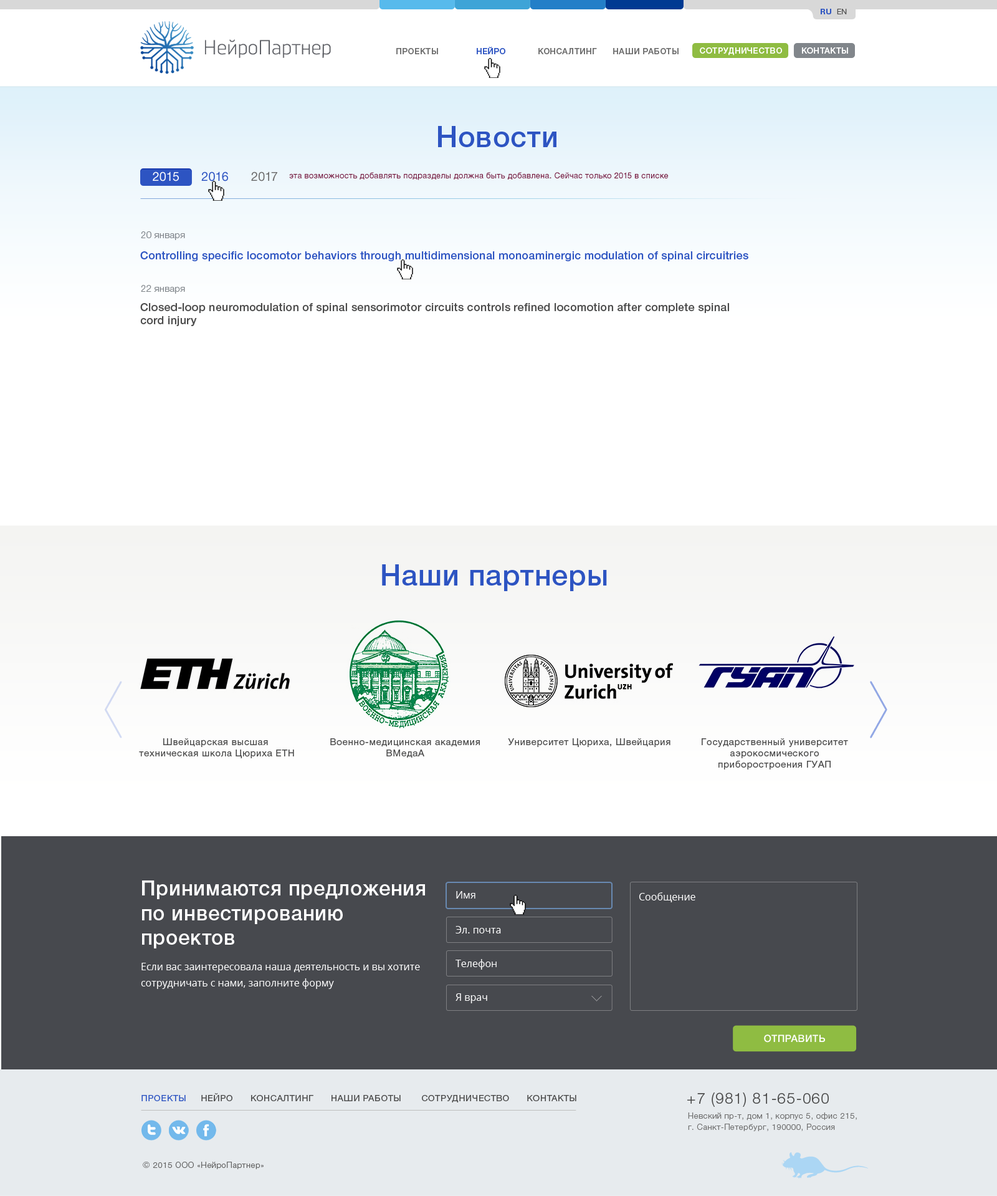
<style>
.page{position:relative;width:997px;height:1196px;background:#ffffff}
.page>*{position:absolute;margin:0}
.t1{font:7.5px "HelveticaNeueCyr-Bold";letter-spacing:0.05em;color:#2d54c2;text-transform:uppercase}
.t2{font:7.5px "HelveticaNeueCyr-Light";letter-spacing:0.05em;color:#4b4b4b;text-transform:uppercase}
.t3{font:8.1px "HelveticaNeueCyr-Medium";letter-spacing:0.05em;color:#6d6d6d;text-transform:uppercase}
.t4{font:8.1px "HelveticaNeueCyr-Medium";letter-spacing:0.05em;color:#2d54c2;text-transform:uppercase}
.t5{font:8.1px "HelveticaNeueCyr-Medium";letter-spacing:0.05em;color:#ffffff;text-transform:uppercase}
.t6{font:29.3px "HelveticaNeueCyr-Medium";letter-spacing:0.02em;color:#2d54c2}
.t7{font:12.5px "HelveticaNeueCyr-Roman";letter-spacing:0.015em;color:#ffffff}
.t8{font:12.5px "HelveticaNeueCyr-Roman";letter-spacing:0.02em;color:#2d54c2}
.t9{font:12.5px "HelveticaNeueCyr-Roman";letter-spacing:0.02em;color:#6d6d6d}
.t10{font:8.1px "HelveticaNeueCyr-Roman";letter-spacing:0.02em;color:#67002a}
.t11{font:9.4px "HelveticaNeueCyr-Light";letter-spacing:0.02em;color:#81868b}
.t12{font:11.2px "HelveticaNeueCyr-Medium";letter-spacing:0.015em;color:#2d54c2}
.t13{font:11.2px/13.1px "HelveticaNeueCyr-Medium";letter-spacing:0.015em;color:#4b4b4b}
.t14{font:29.1px "HelveticaNeueCyr-Medium";letter-spacing:0.02em;color:#2d54c2}
.t15{font:9.4px "HelveticaNeueCyr-Roman";letter-spacing:0.05em;color:#4b4b4b}
.t16{font:20.6px "HelveticaNeueCyr-Medium";letter-spacing:0.02em;color:#ffffff}
.t17{font:10px "OpenSans";color:#ffffff}
.t18{font:10px/16.2px "OpenSans";color:#ffffff}
.t19{font:10px "HelveticaNeueCyr-Medium";letter-spacing:0.02em;color:#ffffff;text-transform:uppercase}
.t20{font:8.7px "HelveticaNeueCyr-Roman";letter-spacing:0.05em;color:#4b4b4b;text-transform:uppercase}
.t21{font:8.7px "HelveticaNeueCyr-Roman";letter-spacing:0.05em;color:#2d54c2;text-transform:uppercase}
.t22{font:15.3px "HelveticaNeueCyr-Light";letter-spacing:0.05em;color:#4b4b4b}
.t23{font:8.1px/11.2px "HelveticaNeueCyr-Light";letter-spacing:0.05em;color:#6f6f6f}
.t24{font:8.1px "HelveticaNeueCyr-Light";letter-spacing:0.05em;color:#636363}
.t25{font:8.7px "HelveticaNeueCyr-Roman";letter-spacing:0.05em;color:#636363}
</style>
<div class="page">
<p class="t1" style="left:821px;top:9px;width:26px;height:5px">Ru  <span class="t2">En</span></p>
<p class="t3" style="left:396px;top:47px;width:283px;height:7px">Проекты              <span class="t4">Нейро</span>            Консалтинг      Наши работы</p>
<p class="t5" style="left:700px;top:47px;width:148px;height:8px">Сотрудничество       Контакты</p>
<p class="t6" style="left:438px;top:126px;width:119px;height:21px">Новости</p>
<p class="t7" style="left:153px;top:171px;width:124px;height:10px">2015      <span class="t8">2016</span><span class="t9">      2017</span></p>
<p class="t10" style="left:289px;top:172px;width:379px;height:8px">эта возможность добавлять подразделы должна быть добавлена. Сейчас только 2015 в списке</p>
<p class="t11" style="left:141px;top:231px;width:44px;height:9px">20 января</p>
<p class="t12" style="left:140px;top:251px;width:609px;height:10px">Controlling specific locomotor behaviors through multidimensional monoaminergic modulation of spinal circuitries</p>
<p class="t11" style="left:141px;top:285px;width:44px;height:9px">22 января</p>
<p class="t13" style="left:140px;top:303px;width:589px;height:23px">Closed-loop neuromodulation of spinal sensorimotor circuits controls refined locomotion after complete spinal <br>cord injury</p>
<p class="t14" style="left:382px;top:564px;width:225px;height:27px">Наши партнеры</p>
<p class="t15" style="left:139px;top:738px;width:155px;height:20px;text-align:center">Швейцарская высшая <br>техническая школа Цюриха ETH</p>
<p class="t15" style="left:330px;top:738px;width:150px;height:19px;text-align:center">Военно-медицинская академия<br>ВМедаА</p>
<p class="t15" style="left:508px;top:738px;width:163px;height:9px">Университет Цюриха, Швейцария</p>
<p class="t15" style="left:702px;top:738px;width:146px;height:31px;text-align:center">Государственный университет<br>аэрокосмического<br>приборостроения ГУАП</p>
<p class="t16" style="left:142px;top:880px;width:283px;height:68px">Принимаются предложения<br>по инвестированию<br>проектов</p>
<p class="t17" style="left:456px;top:891px;width:20px;height:7px">Имя</p>
<p class="t17" style="left:639px;top:892px;width:57px;height:10px">Сообщение</p>
<p class="t17" style="left:456px;top:926px;width:45px;height:7px">Эл. почта</p>
<p class="t18" style="left:141px;top:962px;width:279px;height:27px">Если вас заинтересовала наша деятельность и вы хотите сотрудничать с нами, заполните форму</p>
<p class="t17" style="left:456px;top:959px;width:41px;height:10px">Телефон</p>
<p class="t17" style="left:456px;top:993px;width:31px;height:10px">Я врач</p>
<p class="t19" style="left:764px;top:1034px;width:61px;height:8px">отправить</p>
<p class="t20" style="left:142px;top:1092px;width:435px;height:10px"><span class="t21">Проекты</span>     Нейро      Консалтинг      Наши работы       Сотрудничество      Контакты</p>
<p class="t22" style="left:688px;top:1092px;width:141px;height:14px">+7 (981) 81-65-060</p>
<p class="t23" style="left:688px;top:1112px;width:169px;height:19px">Невский пр-т, дом 1, корпус 5, офис 215,<br>г. Санкт-Петербург, 190000, Россия</p>
<p class="t24" style="left:143px;top:1161px;width:121px;height:8px"><span class="t25">© </span>2015 ООО «НейроПартнер»</p>
</div>
